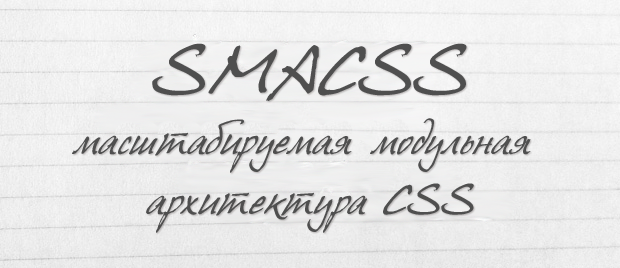
<style>
.page{position:relative;width:620px;height:268px}
.page>*{position:absolute;margin:0}
.t1{font:36px/60px "HansHand-_cyr";color:#4f4f4f}
.t2{font:59px/60px "HansHand-_cyr";color:#4f4f4f}
</style>
<div class="page">
<p class="t1" style="left:72px;top:43px;width:459px;height:190px;text-align:center"><span class="t2">SMACSS<br></span>масштабируемая модульная <br>архитектура CSS</p>
</div>
